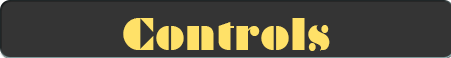
<style>
.page{position:relative;width:451px;height:58px;background:#343434}
.page>*{position:absolute;margin:0}
.t1{font:72.3px "Braggadocio";letter-spacing:0.01em;color:#ffe168;scale:0.91 1}
</style>
<div class="page">
<p class="t1" style="left:123px;top:18px;width:207px;height:33px">Controls</p>
</div>
